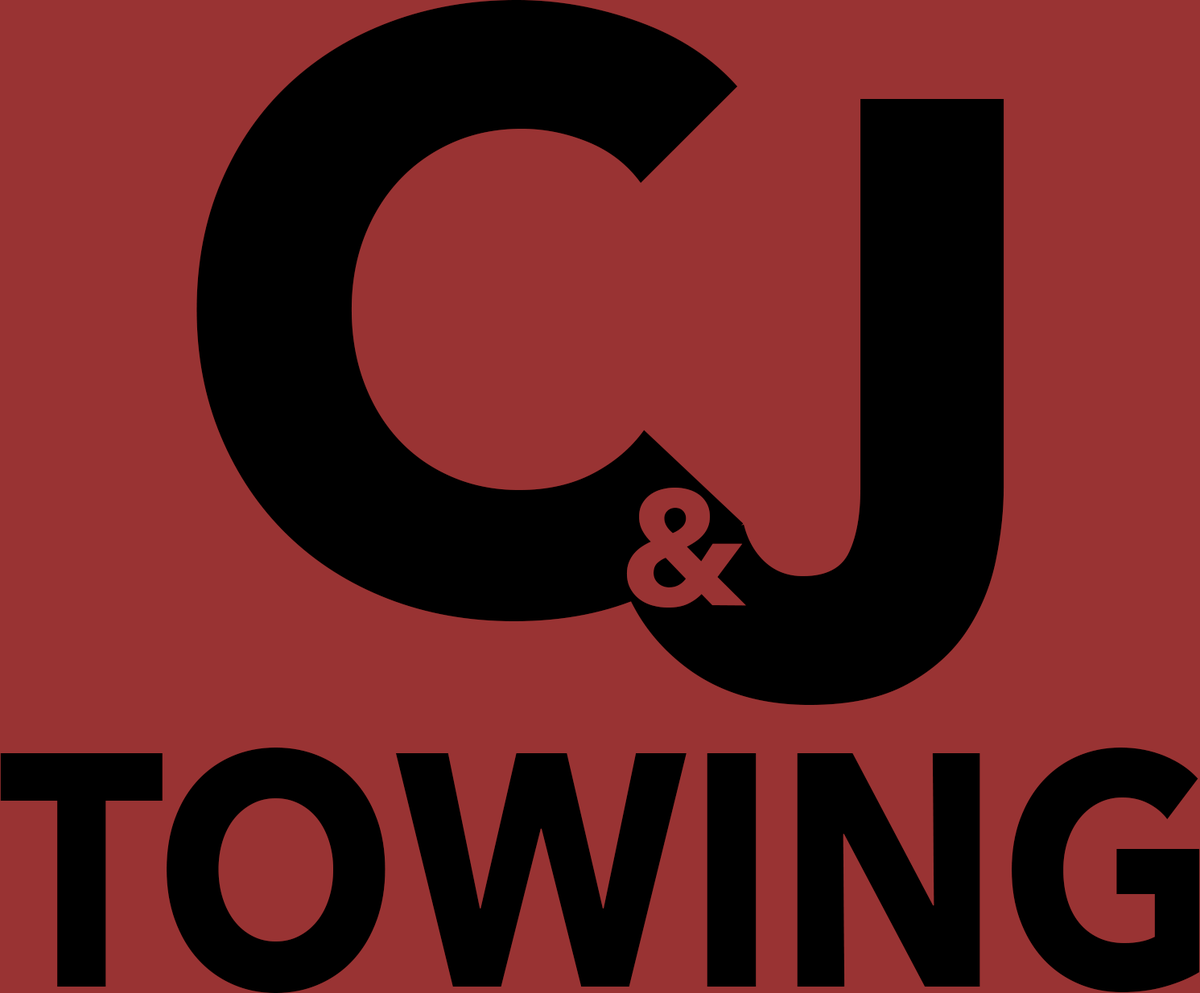
<style>
.page{position:relative;width:1200px;height:993px;background:#993333}
.page>*{position:absolute;margin:0}
.t1{font:833.6px "AvenirNext-Bold";color:#000000}
.t2{font:161.7px "AvenirNext-Bold";color:#993333}
.t3{font:329.5px "AvenirNext-Bold";color:#000000;scale:0.86 1}
</style>
<div class="page">
<p class="t1" style="left:196px;top:0px;width:548px;height:621px">C</p>
<p class="t1" style="left:617px;top:99px;width:388px;height:606px">J</p>
<p class="t2" style="left:626px;top:488px;width:120px;height:120px">&amp;</p>
<p class="t3" style="left:0px;top:748px;width:1200px;height:245px">TOWING</p>
</div>
